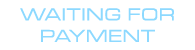
<style>
.page{position:relative;width:195px;height:50px;background:#ffffff}
.page>*{position:absolute;margin:0}
.t1{font:18px "MicrogrammaD-MediExte";letter-spacing:0.075em;color:#8dd9ff;text-transform:uppercase}
</style>
<div class="page">
<p class="t1" style="left:20px;top:8px;width:154px;height:34px;text-align:center">waiting for<br>payment</p>
</div>
